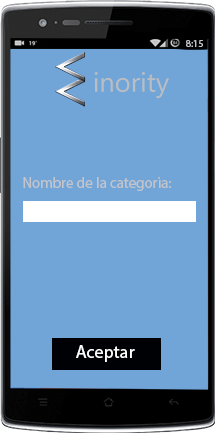
<style>
.page{position:relative;width:215px;height:433px;background:#71a4d7}
.page>*{position:absolute;margin:0}
.t1{font:10px "MyriadPro-Regular";color:#c4c5cb}
.t2{font:15px "MyriadPro-Regular";color:#c4c5cb}
.t3{font:18px "MyriadPro-Regular";color:#ffffff}
</style>
<div class="page">
<p class="t1" style="left:186px;top:40px;width:17px;height:7px">8:15</p>
<p class="t2" style="left:23px;top:177px;width:148px;height:14px">Nombre de la categoria:</p>
<p class="t3" style="left:76px;top:345px;width:59px;height:17px">Aceptar</p>
</div>
